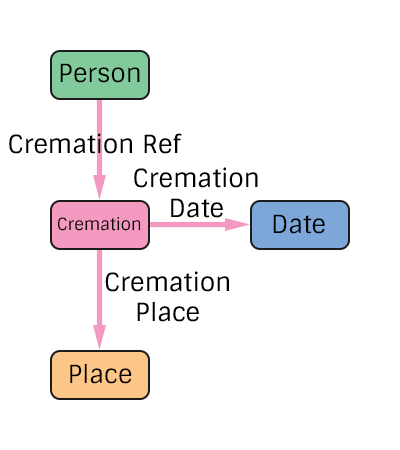
<style>
.page{position:relative;width:400px;height:450px;background:#ffffff}
.page>*{position:absolute;margin:0}
.t1{font:25px "Sintony";color:#000000}
.t2{font:16.7px "Sintony";color:#000000}
</style>
<div class="page">
<p class="t1" style="left:60px;top:63px;width:80px;height:20px">Person</p>
<p class="t1" style="left:9px;top:133px;width:173px;height:21px">Cremation Ref</p>
<p class="t1" style="left:134px;top:167px;width:124px;height:51px;text-align:center">Cremation<br>Date</p>
<p class="t2" style="left:57px;top:217px;width:84px;height:14px">Cremation</p>
<p class="t1" style="left:273px;top:214px;width:52px;height:20px">Date</p>
<p class="t1" style="left:105px;top:271px;width:124px;height:51px;text-align:center">Cremation<br>Place</p>
<p class="t1" style="left:70px;top:363px;width:62px;height:21px">Place</p>
</div>
